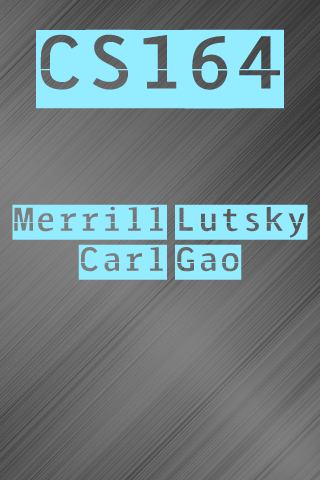
<style>
.page{position:relative;width:320px;height:480px}
.page>*{position:absolute;margin:0}
.t1{font:33.3px "Solari";color:#93ecff}
.t2{font:75px "Solari";color:#93ecff}
</style>
<div class="page">
<p class="t1" style="left:12px;top:29px;width:296px;height:251px;text-align:center"><span class="t2">CS164<br><br><br></span>Merrill Lutsky<br>Carl Gao</p>
</div>
